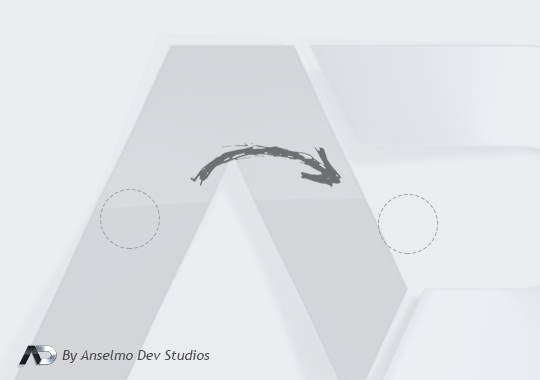
<style>
.page{position:relative;width:540px;height:380px;background:#eaecf0}
.page>*{position:absolute;margin:0}
.t1{font:13.9px "TrebuchetMS-Italic";color:#4d4d4d}
</style>
<div class="page">
<p class="t1" style="left:62px;top:350px;width:148px;height:13px">By Anselmo Dev Studios</p>
</div>
